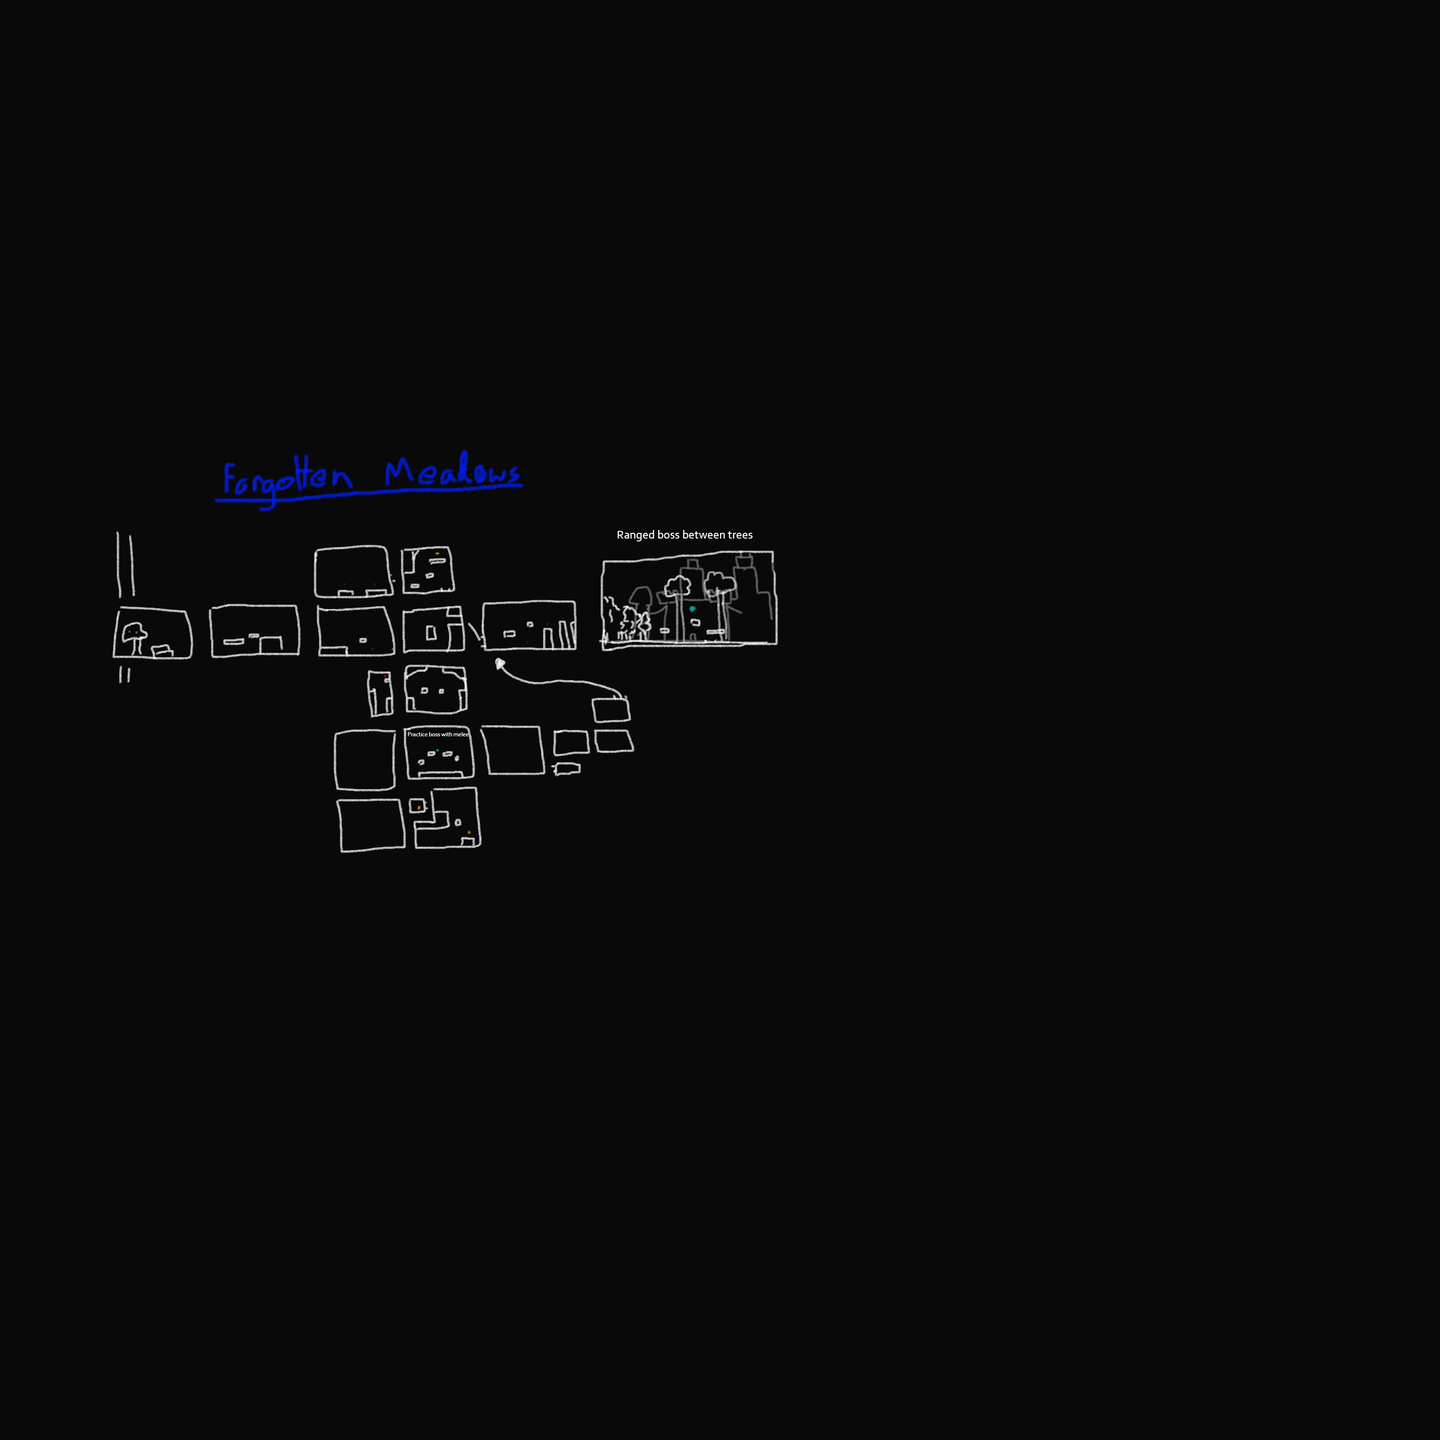
<style>
.page{position:relative;width:1440px;height:1440px;background:#090909}
.page>*{position:absolute;margin:0}
.t1{font:12px "Corbel";color:#ffffff}
.t2{font:6px "Corbel";color:#ffffff}
</style>
<div class="page">
<p class="t1" style="left:617px;top:530px;width:136px;height:11px">Ranged boss between trees</p>
<p class="t2" style="left:408px;top:732px;width:61px;height:4px">Practice boss with melee</p>
</div>
